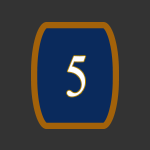
<style>
.page{position:relative;width:150px;height:150px;background:#333333}
.page>*{position:absolute;margin:0}
.t1{font:62.5px "TimesNewRomanPSMT";letter-spacing:0.1em;color:#ffffff;scale:0.75 1}
</style>
<div class="page">
<p class="t1" style="left:67px;top:56px;width:19px;height:41px">5</p>
</div>
